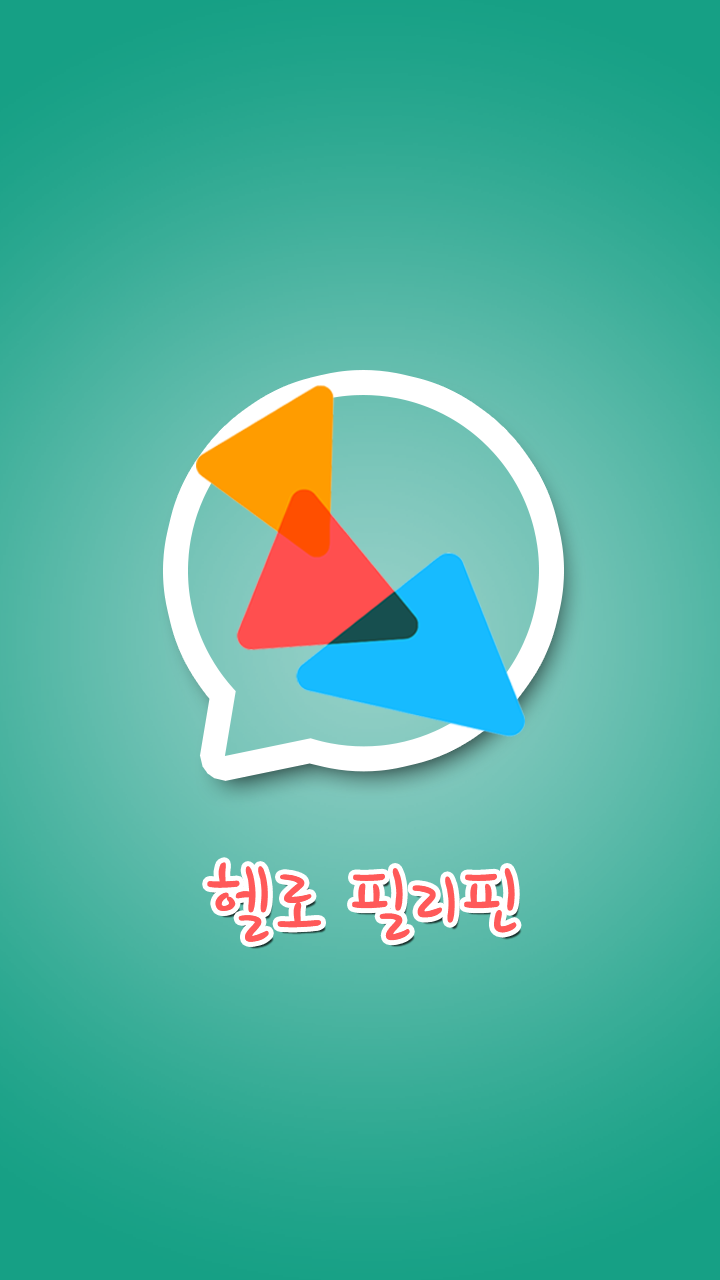
<style>
.page{position:relative;width:720px;height:1280px}
.page>*{position:absolute;margin:0}
.t1{font:95.8px "HoonWcatR";color:#ff5959}
</style>
<div class="page">
<p class="t1" style="left:207px;top:862px;width:310px;height:80px">헬로 필리핀</p>
</div>
